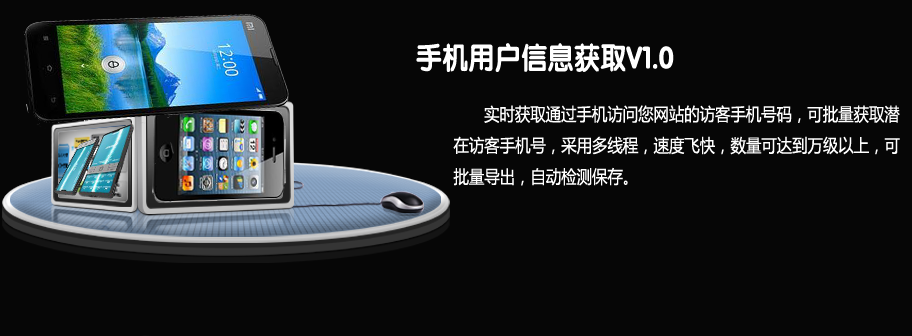
<style>
.page{position:relative;width:912px;height:336px;background:#060606}
.page>*{position:absolute;margin:0}
.t1{font:30.6px "FZY4JW--GB1-0";color:#ffffff;scale:0.86 1}
.t2{font:17.9px "MicrosoftYaHeiUI";color:#ffffff;scale:0.86 1}
</style>
<div class="page">
<p class="t1" style="left:416px;top:43px;width:258px;height:29px">手机用户信息获取V1.0</p>
<p class="t2" style="left:453px;top:105px;width:447px;height:81px">实时获取通过手机访问您网站的访客手机号码，可批量获取潜<br>在访客手机号，采用多线程，速度飞快，数量可达到万级以上，可<br>批量导出，自动检测保存。</p>
</div>
